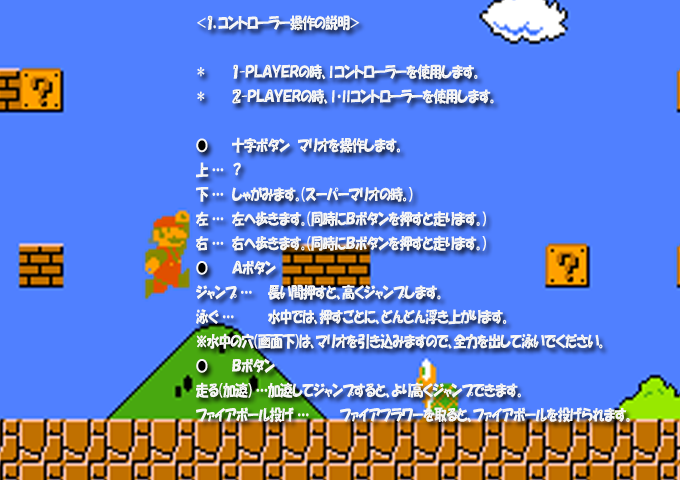
<style>
.page{position:relative;width:680px;height:480px;background:#5080ff}
.page>*{position:absolute;margin:0}
.t1{font:15.4px "HGPSoeiKakupoptai";letter-spacing:-0.015em;color:#f6f6f6;scale:0.82 1}
</style>
<div class="page">
<p class="t1" style="left:196px;top:15px;width:434px;height:408px">＜１．コントローラー操作の説明＞<br><br>＊ １-ＰＬＡＹＥＲの時、Ⅰコントローラーを使用します。<br>＊ ２-ＰＬＡＹＥＲの時、Ⅰ・Ⅱコントローラーを使用します。<br><br>● 十字ボタン　マリオを操作します。<br>上 … ？<br>下 … しゃがみます。（スーパーマリオの時。）<br>左 … 左へ歩きます。（同時にＢボタンを押すと走ります。）<br>右 … 右へ歩きます。（同時にＢボタンを押すと走ります。）<br>● Ａボタン<br>ジャンプ … 長い間押すと、高くジャンプします。<br>泳ぐ … 水中では、押すごとに、どんどん浮き上がります。<br>※水中の穴（画面下）は、マリオを引き込みますので、全力を出して泳いでください。<br>● Ｂボタン<br>走る（加速） … 加速してジャンプすると、より高くジャンプできます。<br>ファイアボール投げ … ファイアフラワーを取ると、ファイアボールを投げられます。</p>
</div>
